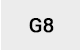
<style>
.page{position:relative;width:80px;height:50px;background:#ececec}
.page>*{position:absolute;margin:0}
.t1{font:20px "Roboto-Regular";color:#000000;font-weight:bold}
</style>
<div class="page">
<p class="t1" style="left:29px;top:18px;width:25px;height:15px">G8</p>
</div>
